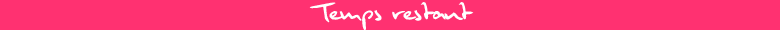
<style>
.page{position:relative;width:780px;height:30px;background:#ff3171}
.page>*{position:absolute;margin:0}
.t1{font:24px "Muldershandwriting";color:#ffffff}
</style>
<div class="page">
<p class="t1" style="left:309px;top:2px;width:165px;height:28px">Temps restant</p>
</div>
